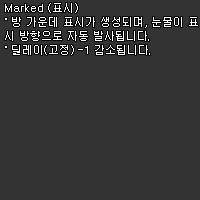
<style>
.page{position:relative;width:200px;height:200px;background:#333333}
.page>*{position:absolute;margin:0}
.t1{font:11px/14px "Dotum";color:#ffffff}
</style>
<div class="page">
<p class="t1" style="left:5px;top:3px;width:193px;height:52px">Marked (표시)<br>˚ 방 가운데 표시가 생성되며, 눈물이 표<br>시 방향으로 자동 발사됩니다.<br>˚ 딜레이(고정) -1 감소됩니다.</p>
</div>
